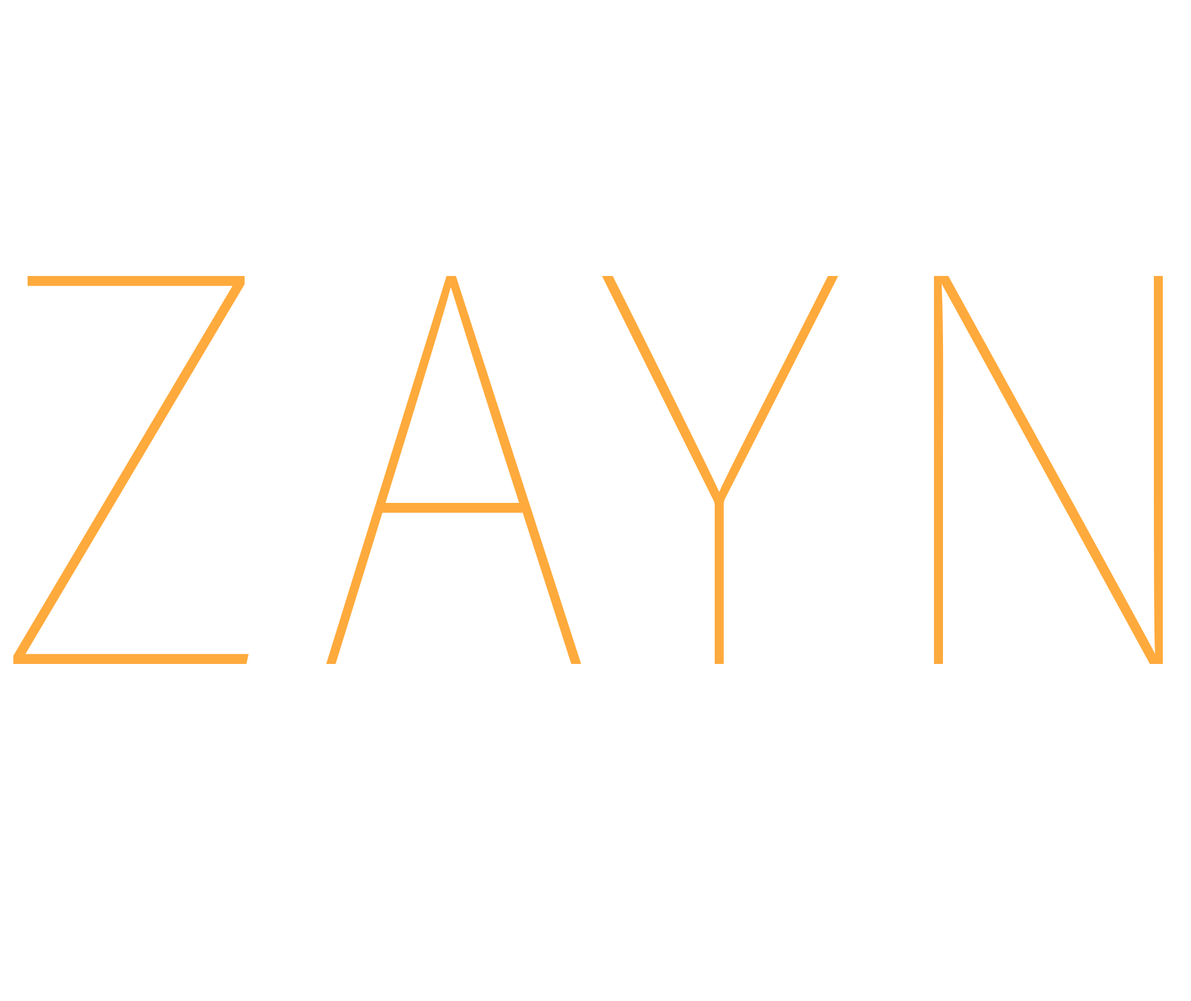
<style>
.page{position:relative;width:1191px;height:1001px;background:#ffffff}
.page>*{position:absolute;margin:0}
.t1{font:551.5px "AcuminPro-Thin";letter-spacing:0.1em;color:#ffaa3c;scale:0.81 1}
</style>
<div class="page">
<p class="t1" style="left:13px;top:276px;width:1150px;height:388px">ZAYN</p>
</div>
